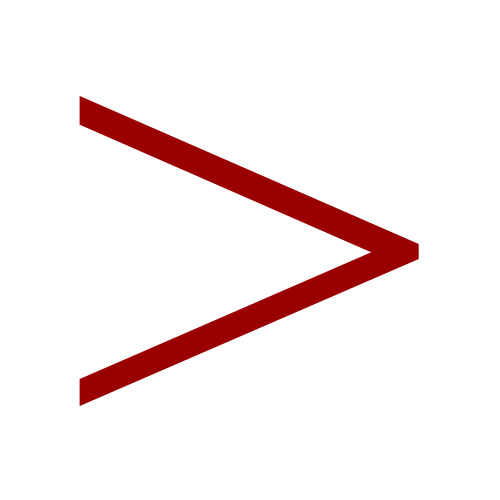
<style>
.page{position:relative;width:500px;height:500px;background:#ffffff}
.page>*{position:absolute;margin:0}
.t1{font:644.8px "TimesNewRomanPSMT";color:#9a0000}
</style>
<div class="page">
<p class="t1" style="left:79px;top:96px;width:340px;height:310px">&gt;</p>
</div>
